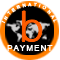
<style>
.page{position:relative;width:60px;height:60px;background:#000000}
.page>*{position:absolute;margin:0}
.t1{font:4.3px "ArialMT";letter-spacing:0.56em;color:#fefefe;font-weight:bold}
.t2{font:38px "KozGoPro-ExtraLight";color:#fe5c00;font-weight:bold}
.t3{font:7.5px "ArialMT";letter-spacing:0.16em;color:#fefefe;font-weight:bold}
</style>
<div class="page">
<p class="t1" style="left:1px;top:2px;width:56px;height:22px;rotate:1deg">INTERNATIONAL</p>
<p class="t2" style="left:22px;top:11px;width:20px;height:31px">b</p>
<p class="t3" style="left:7px;top:45px;width:46px;height:6px">PAYMENT</p>
</div>
